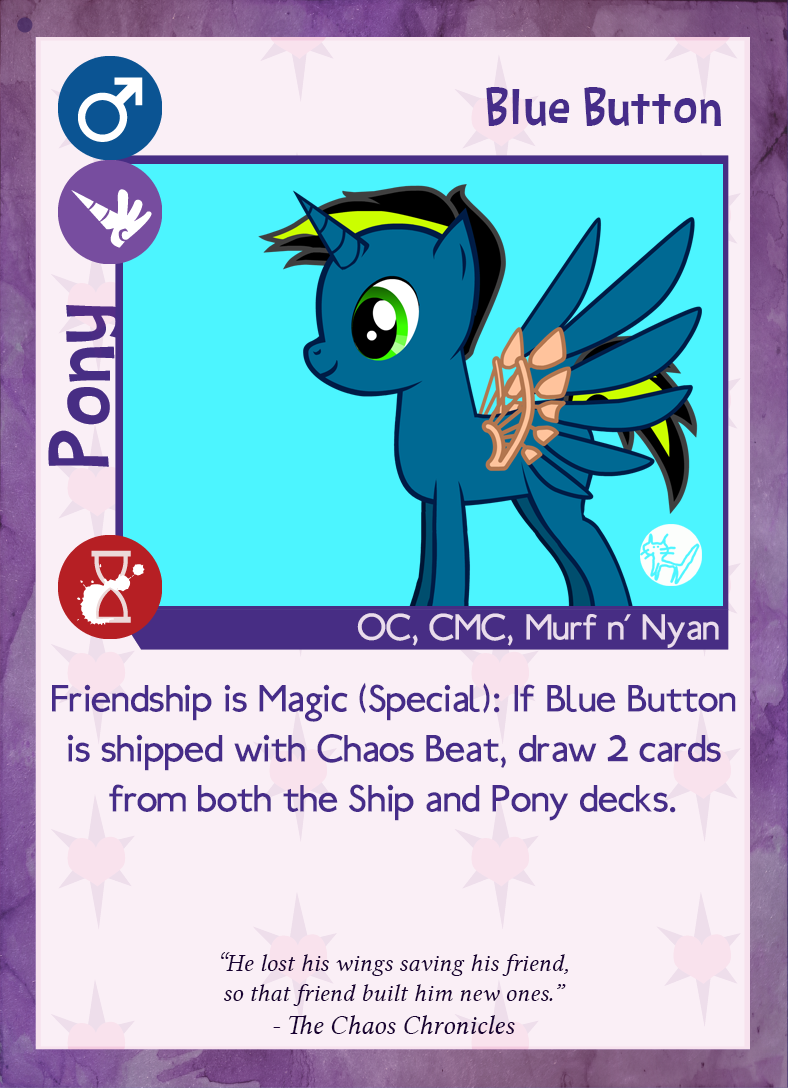
<style>
.page{position:relative;width:788px;height:1088px;background:#faeff6}
.page>*{position:absolute;margin:0}
.t1{font:54.2px "BarthowheelRegular";color:#462c89}
.t2{font:39.6px "Ubahn";color:#eadcec}
.t3{font:41.7px "Ubahn";color:#462c89}
.t4{font:25px "LinLibertineI";color:#190233}
.t5{font:27.1px "LinLibertineI";color:#190233}
</style>
<div class="page">
<p class="t1" style="left:486px;top:87px;width:235px;height:39px">Blue Button</p>
<p class="t2" style="left:357px;top:613px;width:362px;height:35px">OC, CMC, Murf n’ Nyan</p>
<p class="t3" style="left:52px;top:682px;width:684px;height:139px;text-align:center">Friendship is Magic (Special): If Blue Button<br>is shipped with Chaos Beat, draw 2 cards<br>from both the Ship and Pony decks.</p>
<p class="t4" style="left:221px;top:952px;width:347px;height:82px;text-align:center">“He lost his wings saving his friend,<br>so that friend built him new ones.”<br>- <span class="t5">The Chaos Chronicles</span></p>
</div>
